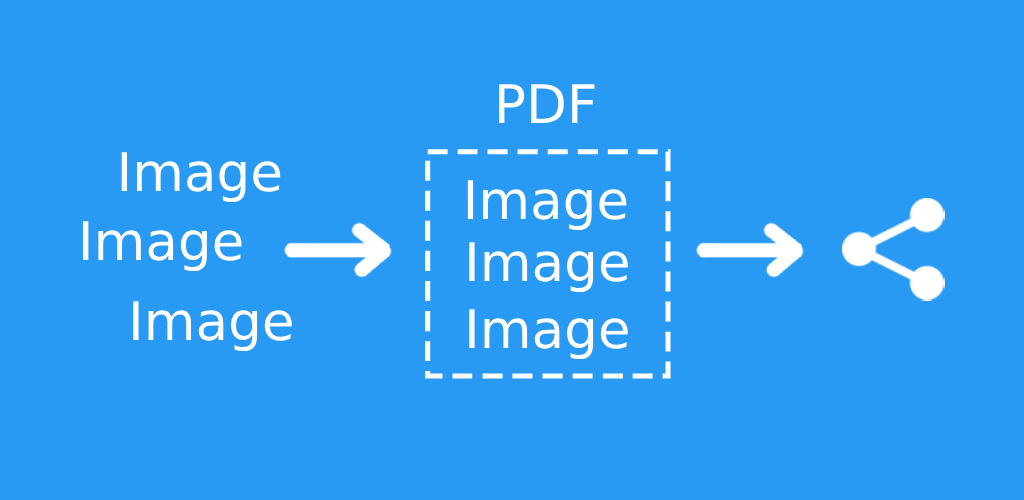
<style>
.page{position:relative;width:1024px;height:500px;background:#299af3}
.page>*{position:absolute;margin:0}
.t1{font:53.2px "DejaVuSans";color:#ffffff}
</style>
<div class="page">
<p class="t1" style="left:499px;top:84px;width:96px;height:39px">PDF</p>
<p class="t1" style="left:121px;top:152px;width:160px;height:50px">Image</p>
<p class="t1" style="left:467px;top:180px;width:160px;height:50px">Image</p>
<p class="t1" style="left:83px;top:221px;width:159px;height:50px">Image</p>
<p class="t1" style="left:469px;top:242px;width:159px;height:50px">Image</p>
<p class="t1" style="left:133px;top:301px;width:159px;height:50px">Image</p>
<p class="t1" style="left:469px;top:309px;width:159px;height:50px">Image</p>
</div>
